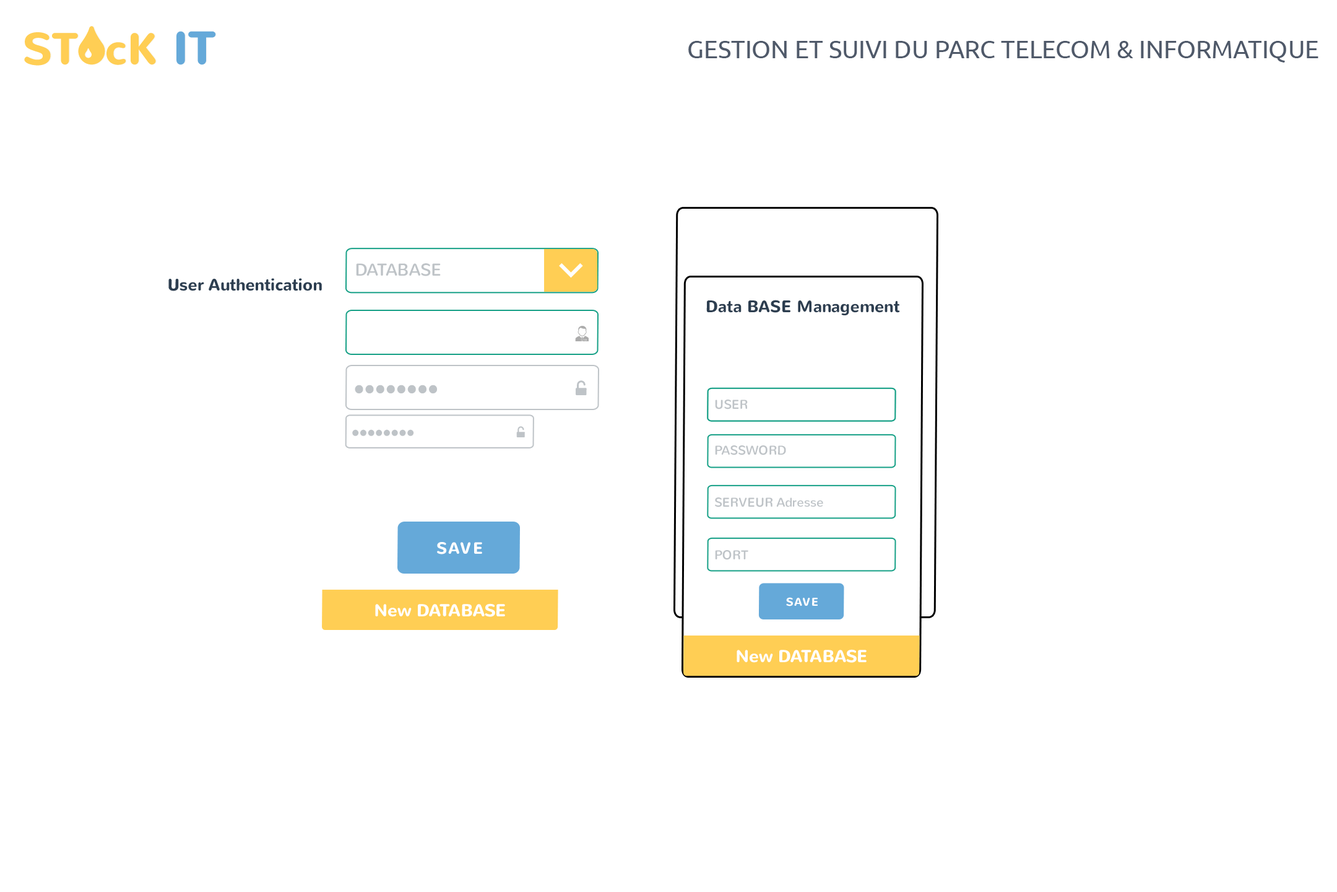
<style>
.page{position:relative;width:1337px;height:892px;background:#ffffff}
.page>*{position:absolute;margin:0}
.t1{font:24.8px "Ubuntu";color:#4f5969;text-transform:uppercase}
.t2{font:17.3px "Nunito-Regular";color:#bec3c7}
.t3{font:16.6px "Nunito-Bold";color:#2d3e50}
.t4{font:12.9px "Nunito-Regular";color:#bec3c7}
.t5{font:16.2px "Nunito-Bold";letter-spacing:0.1em;color:#ffffff}
.t6{font:17.2px "Nunito-Bold";color:#ffffff}
.t7{font:11.3px "Nunito-Bold";letter-spacing:0.1em;color:#ffffff}
</style>
<div class="page">
<p class="t1" style="left:689px;top:41px;width:630px;height:22px">GESTION ET SUIVI DU PARC TELECOM &amp; INFORMATIQUE</p>
<p class="t2" style="left:356px;top:263px;width:85px;height:13px">DATABASE</p>
<p class="t3" style="left:168px;top:278px;width:154px;height:13px">User Authentication</p>
<p class="t3" style="left:706px;top:300px;width:194px;height:15px">Data BASE Management</p>
<p class="t4" style="left:715px;top:399px;width:33px;height:10px">USER</p>
<p class="t4" style="left:715px;top:445px;width:71px;height:10px">PASSWORD</p>
<p class="t4" style="left:715px;top:497px;width:108px;height:10px">SERVEUR Adresse</p>
<p class="t5" style="left:437px;top:542px;width:45px;height:12px">SAVE</p>
<p class="t4" style="left:715px;top:550px;width:34px;height:10px">PORT</p>
<p class="t6" style="left:375px;top:603px;width:130px;height:14px">New DATABASE</p>
<p class="t7" style="left:786px;top:597px;width:32px;height:9px">SAVE</p>
<p class="t6" style="left:737px;top:649px;width:130px;height:14px">New DATABASE</p>
</div>
